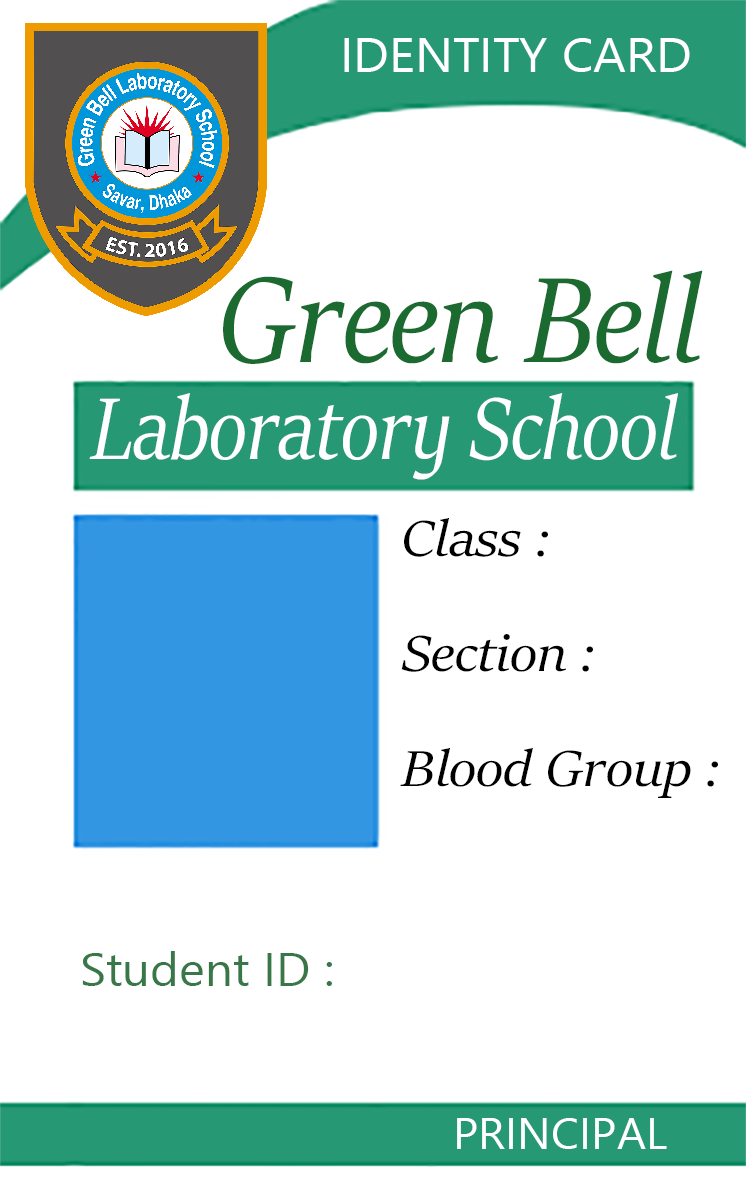
<style>
.page{position:relative;width:746px;height:1180px;background:#ffffff}
.page>*{position:absolute;margin:0}
.t1{font:47.6px "NirmalaUI";color:#ffffff;scale:1.07 1}
.t2{font:136.1px "SitkaBanner-Italic";color:#1b6b31;scale:0.91 1}
.t3{font:98.3px "SitkaBanner-Italic";color:#ffffff;scale:0.86 1}
.t4{font:56.9px "SitkaBanner-Italic";color:#000000;scale:1.06 1}
.t5{font:46.3px "NirmalaUI";color:#387848;scale:1.06 1}
.t6{font:42.6px "NirmalaUI";color:#ffffff;scale:1.06 1}
</style>
<div class="page">
<p class="t1" style="left:344px;top:38px;width:346px;height:34px">IDENTITY CARD</p>
<p class="t2" style="left:223px;top:270px;width:480px;height:94px">Green Bell</p>
<p class="t3" style="left:89px;top:393px;width:589px;height:87px">Laboratory School</p>
<p class="t4" style="left:404px;top:518px;width:144px;height:39px">Class :</p>
<p class="t4" style="left:401px;top:634px;width:192px;height:38px">Section :</p>
<p class="t4" style="left:400px;top:748px;width:318px;height:50px">Blood Group :</p>
<p class="t5" style="left:82px;top:951px;width:250px;height:35px">Student ID :</p>
<p class="t6" style="left:457px;top:1118px;width:210px;height:31px">PRINCIPAL</p>
</div>
